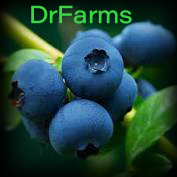
<style>
.page{position:relative;width:177px;height:177px}
.page>*{position:absolute;margin:0}
.t1{font:24px "AcuminConcept-Wide";color:#3fd346}
</style>
<div class="page">
<p class="t1" style="left:31px;top:5px;width:101px;height:19px">DrFarms</p>
</div>
